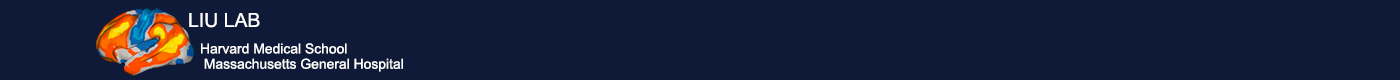
<style>
.page{position:relative;width:1400px;height:80px;background:#0f1938}
.page>*{position:absolute;margin:0}
.t1{font:19.4px "ArialMT";color:#ffffff}
.t2{font:13.9px/15.3px "ArialMT";color:#ffffff}
</style>
<div class="page">
<p class="t1" style="left:189px;top:13px;width:71px;height:15px">LIU LAB</p>
<p class="t2" style="left:201px;top:43px;width:202px;height:29px">Harvard Medical School <br> Massachusetts General Hospital</p>
</div>
